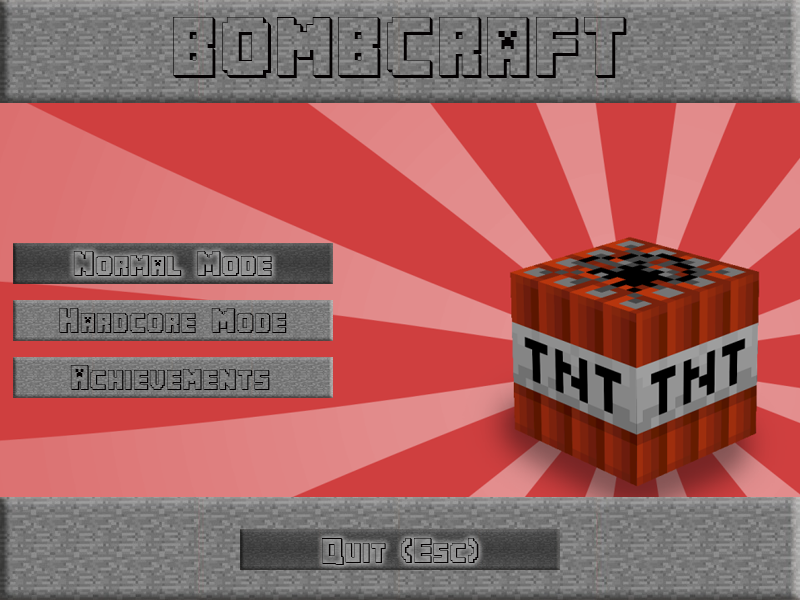
<style>
.page{position:relative;width:800px;height:600px;background:#cf3f3f}
.page>*{position:absolute;margin:0}
.t1{font:72px "MINECRAFTPE";color:#030001}
.t2{font:24px "MINECRAFTPE";color:#030001}
</style>
<div class="page">
<p class="t1" style="left:173px;top:17px;width:454px;height:61px">bombcraft</p>
<p class="t2" style="left:73px;top:251px;width:199px;height:25px">Normal Mode</p>
<p class="t2" style="left:59px;top:308px;width:228px;height:25px">Hardcore Mode</p>
<p class="t2" style="left:70px;top:365px;width:200px;height:25px">Achievements</p>
<p class="t2" style="left:322px;top:538px;width:157px;height:27px">Quit (Esc)</p>
</div>
